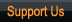
<style>
.page{position:relative;width:72px;height:22px}
.page>*{position:absolute;margin:0}
.t1{font:14px "ArialNarrow";color:#ff9933}
</style>
<div class="page">
<p class="t1" style="left:7px;top:5px;width:57px;height:14px">Support Us</p>
</div>
